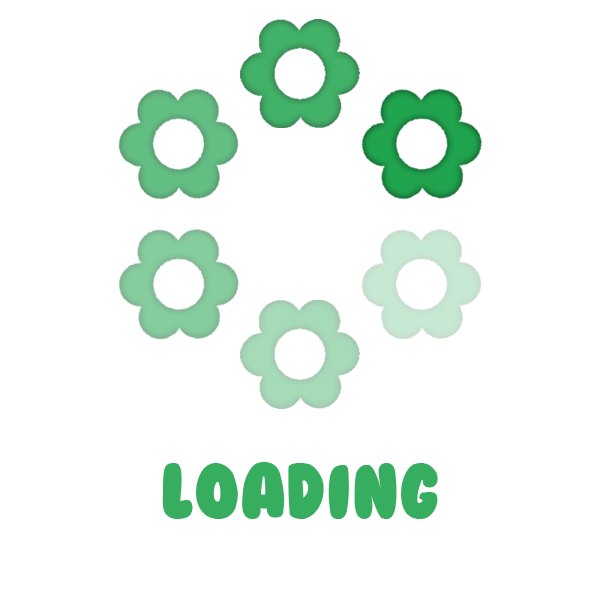
<style>
.page{position:relative;width:600px;height:600px;background:#ffffff}
.page>*{position:absolute;margin:0}
.t1{font:72px "BubbleGum";color:#20a44e}
</style>
<div class="page">
<p class="t1" style="left:162px;top:462px;width:276px;height:57px;opacity:0.9">loading</p>
</div>
